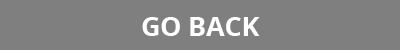
<style>
.page{position:relative;width:400px;height:50px;background:#7f7f7f}
.page>*{position:absolute;margin:0}
.t1{font:26.7px "OpenSans-Bold";color:#ffffff}
</style>
<div class="page">
<p class="t1" style="left:142px;top:17px;width:118px;height:19px">GO BACK</p>
</div>
